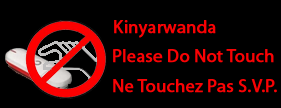
<style>
.page{position:relative;width:281px;height:108px;background:#000000}
.page>*{position:absolute;margin:0}
.t1{font:18px "MyriadPro-Regular";color:#f90204;font-weight:bold}
</style>
<div class="page">
<p class="t1" style="left:114px;top:20px;width:102px;height:18px">Kinyarwanda</p>
<p class="t1" style="left:113px;top:49px;width:161px;height:14px">Please Do Not Touch</p>
<p class="t1" style="left:113px;top:79px;width:164px;height:14px">Ne Touchez Pas S.V.P.</p>
</div>
